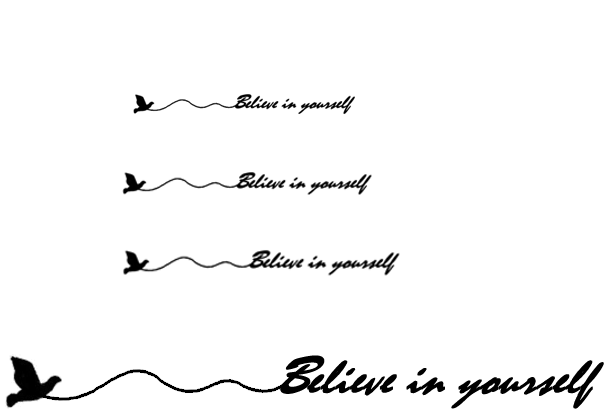
<style>
.page{position:relative;width:611px;height:420px;background:#ffffff}
.page>*{position:absolute;margin:0}
.t1{font:56.2px "BrushScriptMT";color:#000000;font-weight:bold;font-style:italic}
.t2{font:49.7px "Mistral";color:#000000;font-weight:bold;font-style:italic;scale:0.97 1}
</style>
<div class="page">
<p class="t1" style="left:280px;top:355px;width:45px;height:39px">B</p>
<p class="t2" style="left:307px;top:360px;width:297px;height:49px">elieve in yourself</p>
</div>
